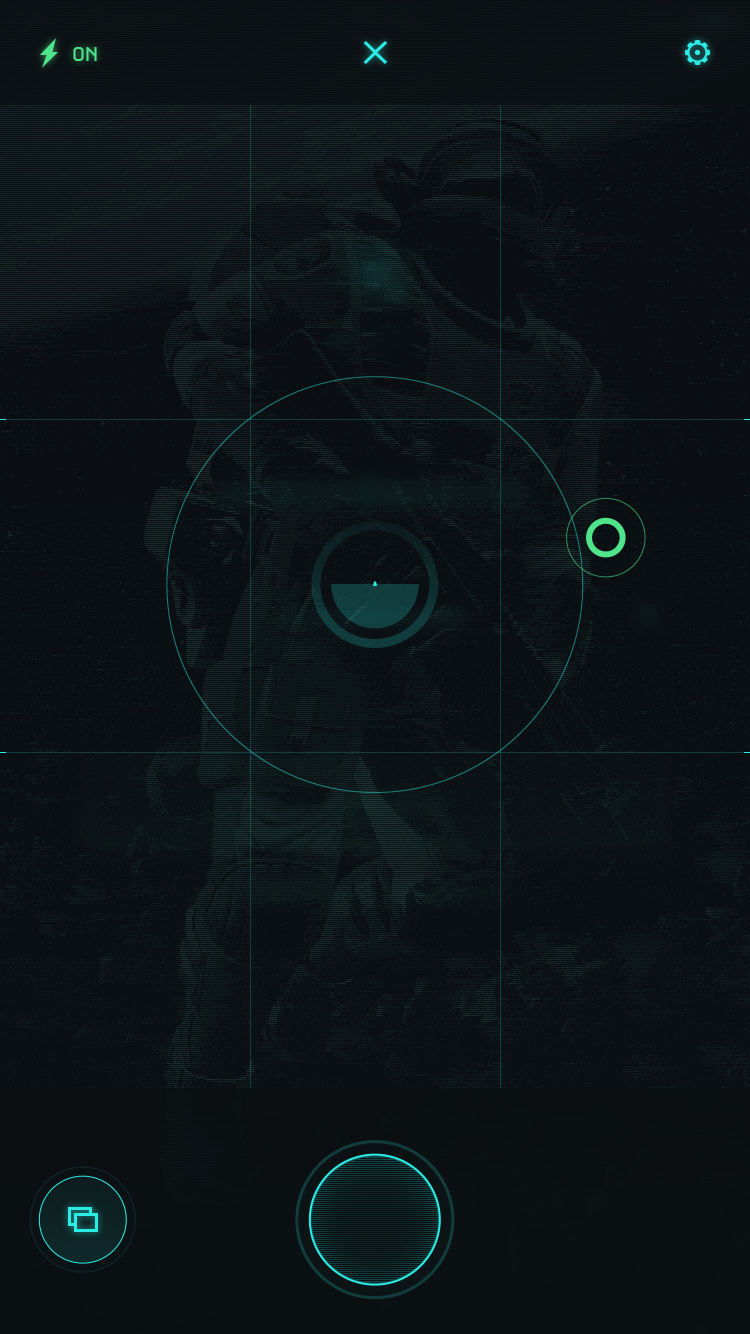
<style>
.page{position:relative;width:750px;height:1334px;background:#0b0f11}
.page>*{position:absolute;margin:0}
.t1{font:24px "ProFontWindows";letter-spacing:0.05em;color:#4fe38b}
</style>
<div class="page">
<p class="t1" style="left:73px;top:47px;width:24px;height:14px">ON</p>
</div>
